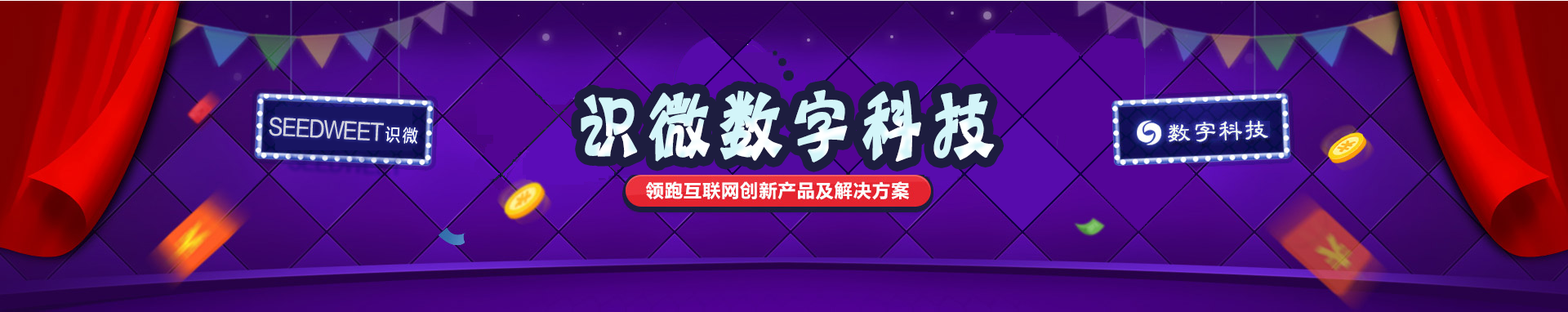
<style>
.page{position:relative;width:1568px;height:312px}
.page>*{position:absolute;margin:0}
.t1{font:79.2px "HYn3gj";letter-spacing:0.015em;color:#d3f5f9;font-weight:bold;scale:0.86 1}
.t2{font:22.6px "FZLTZHUNHK--GBK1-0";letter-spacing:-0.065em;color:#d4d4dd;scale:0.87 1}
.t3{font:17.8px "FZLTZHUNHK--GBK1-0";letter-spacing:0.115em;color:#ffffff;scale:0.87 1}
.t4{font:25.2px "FZLBJW--GB1-0";letter-spacing:0.021em;color:#f6fef1;font-weight:bold}
</style>
<div class="page">
<p class="t1" style="left:581px;top:90px;width:414px;height:73px">识微数字科技</p>
<p class="t2" style="left:269px;top:117px;width:115px;height:24px;rotate:3deg">SEEDWEET</p>
<p class="t3" style="left:385px;top:126px;width:33px;height:19px;rotate:3deg">识微</p>
<p class="t4" style="left:1168px;top:120px;width:100px;height:22px;rotate:-2deg">数字科技</p>
</div>
